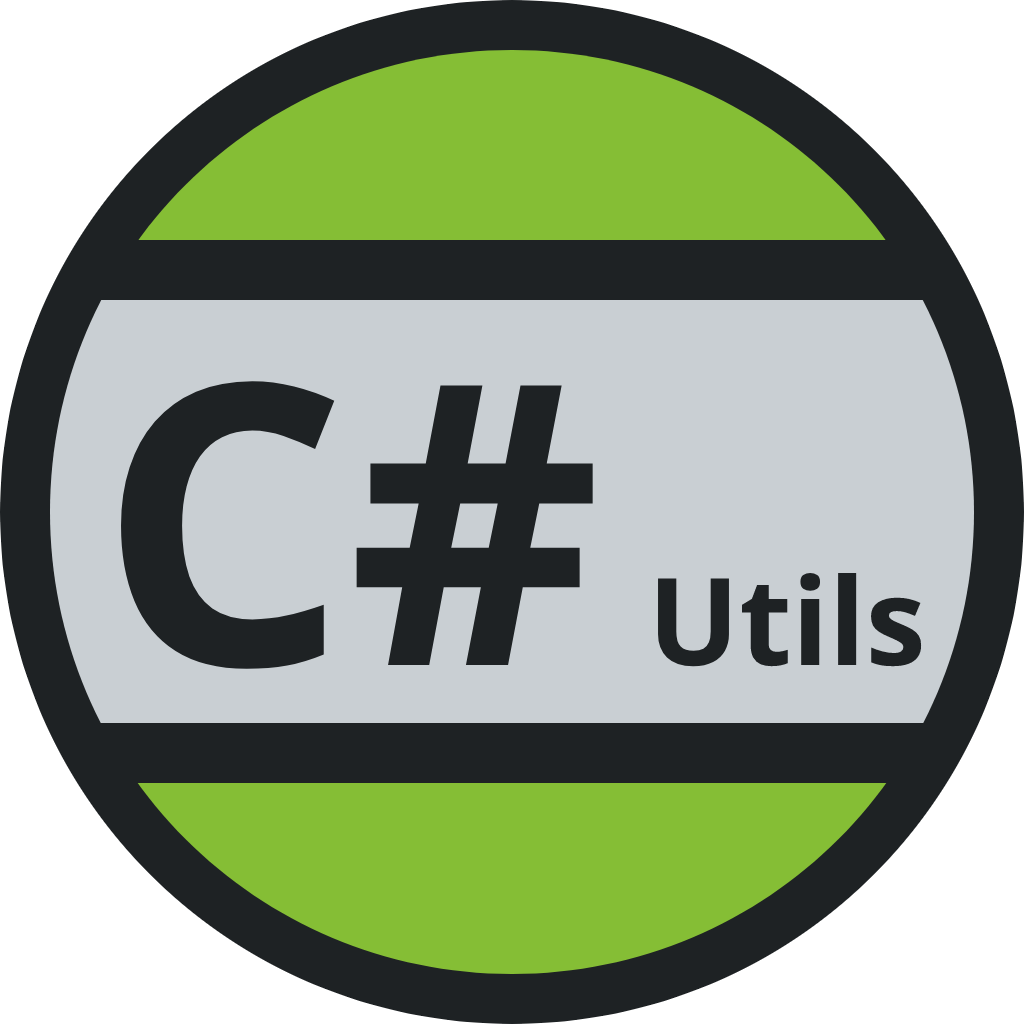
<style>
.page{position:relative;width:1024px;height:1024px;background:#1e2224}
.page>*{position:absolute;margin:0}
.t1{font:121px "OpenSans-Bold";color:#1e2224}
.t2{font:392px "OpenSans-Bold";color:#1e2224}
</style>
<div class="page">
<p class="t1" style="left:121px;top:381px;width:801px;height:288px"><span class="t2">C# </span>Utils</p>
</div>
